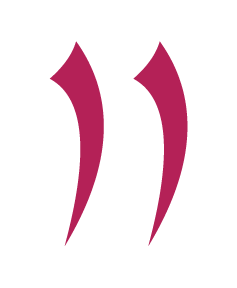
<style>
.page{position:relative;width:237px;height:288px;background:#ffffff}
.page>*{position:absolute;margin:0}
.t1{font:250px "AsianDelight";letter-spacing:0.1em;color:#b42157;scale:0.93 1}
</style>
<div class="page">
<p class="t1" style="left:49px;top:41px;width:139px;height:205px">II</p>
</div>
